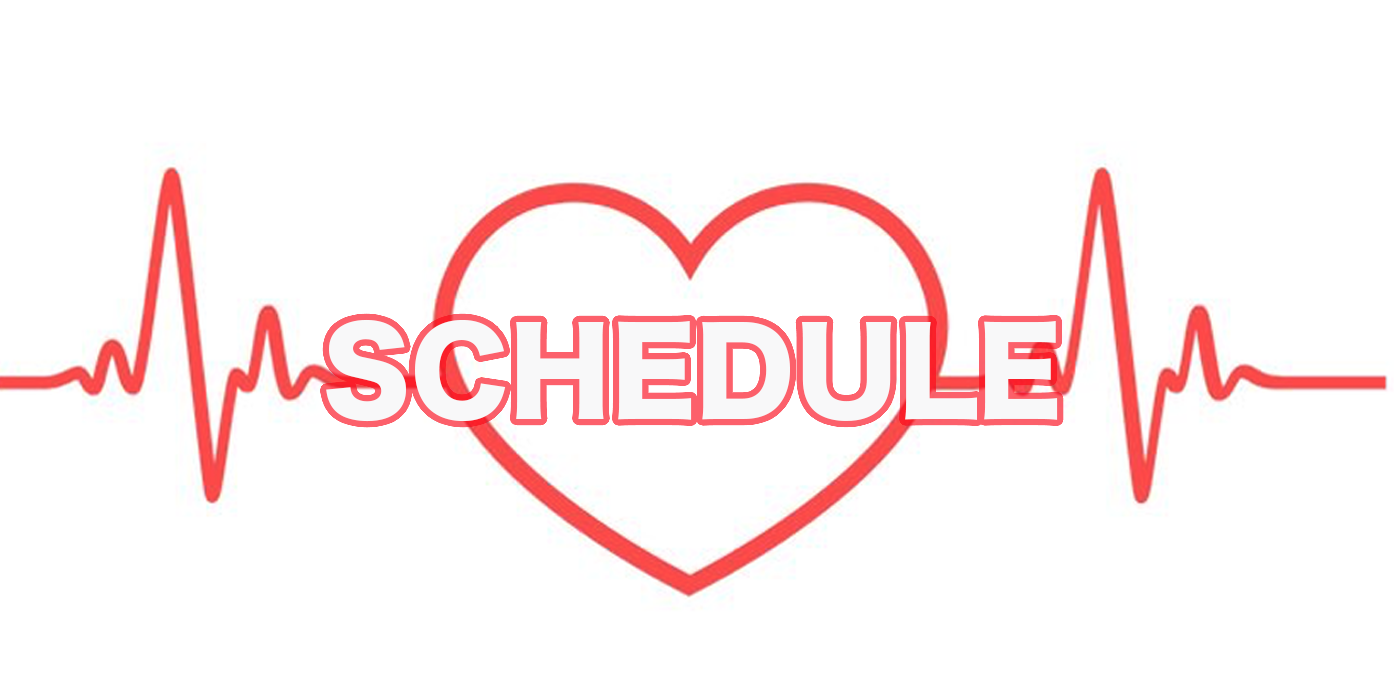
<style>
.page{position:relative;width:1394px;height:697px;background:#ffffff}
.page>*{position:absolute;margin:0}
.t1{font:116.2px "HiraKakuStdN-W8";color:#f8f8f9}
</style>
<div class="page">
<p class="t1" style="left:326px;top:319px;width:732px;height:103px">SCHEDULE</p>
</div>
